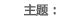
<style>
.page{position:relative;width:61px;height:20px;background:#ffffff}
.page>*{position:absolute;margin:0}
.t1{font:12px "MicrosoftYaHei";color:#5d5d5d;font-weight:bold}
</style>
<div class="page">
<p class="t1" style="left:23px;top:4px;width:33px;height:12px">主题：</p>
</div>
